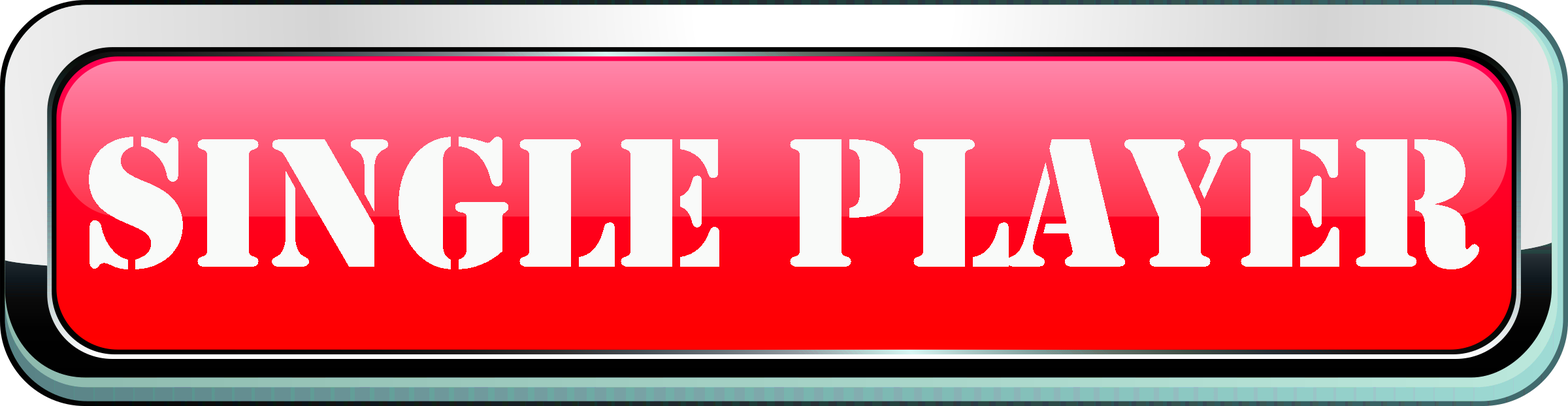
<style>
.page{position:relative;width:1568px;height:406px}
.page>*{position:absolute;margin:0}
.t1{font:170.5px "StencilStd";color:#f9faf9}
</style>
<div class="page">
<p class="t1" style="left:89px;top:137px;width:1390px;height:132px">Single Player</p>
</div>
